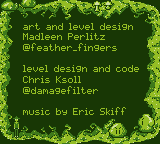
<style>
.page{position:relative;width:160px;height:144px;background:#183705}
.page>*{position:absolute;margin:0}
.t1{font:8px/10.7px "pixelmix";color:#94bd24}
</style>
<div class="page">
<p class="t1" style="left:23px;top:23px;width:116px;height:92px">art and level design<br>Madleen Perlitz<br>@feather_fingers<br><br>level design and code<br>Chris Ksoll<br>@damagefilter<br><br>music by Eric Skiff</p>
</div>
